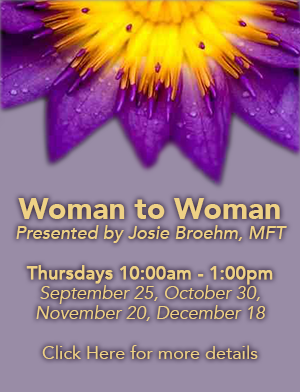
<style>
.page{position:relative;width:300px;height:392px;background:#998ca6}
.page>*{position:absolute;margin:0}
.t1{font:18px/20px "Avenir-BookOblique";color:#eed185}
.t2{font:30px/20px "Avenir-Black";color:#eed185}
.t3{font:18px/20px "Avenir-MediumOblique";color:#eed185}
.t4{font:18px/20px "Avenir-Medium";color:#eed185;font-weight:bold}
.t5{font:18px/20px "Avenir-Roman";color:#eed185}
</style>
<div class="page">
<p class="t1" style="left:16px;top:198px;width:271px;height:161px;text-align:center"><span class="t2">Woman to Woman<br></span><span class="t3">Presented by Josie Broehm, MFT<br><br></span><span class="t4">Thursdays 10:00am - 1:00pm<br></span>September 25, October 30, November 20, December 18<br><br><span class="t5">Click Here for more details</span></p>
</div>
